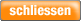
<style>
.page{position:relative;width:81px;height:21px}
.page>*{position:absolute;margin:0}
.t1{font:14px "Helvetica87-CondensedHeavy";color:#ffffff}
</style>
<div class="page">
<p class="t1" style="left:9px;top:5px;width:62px;height:11px">schliessen</p>
</div>
